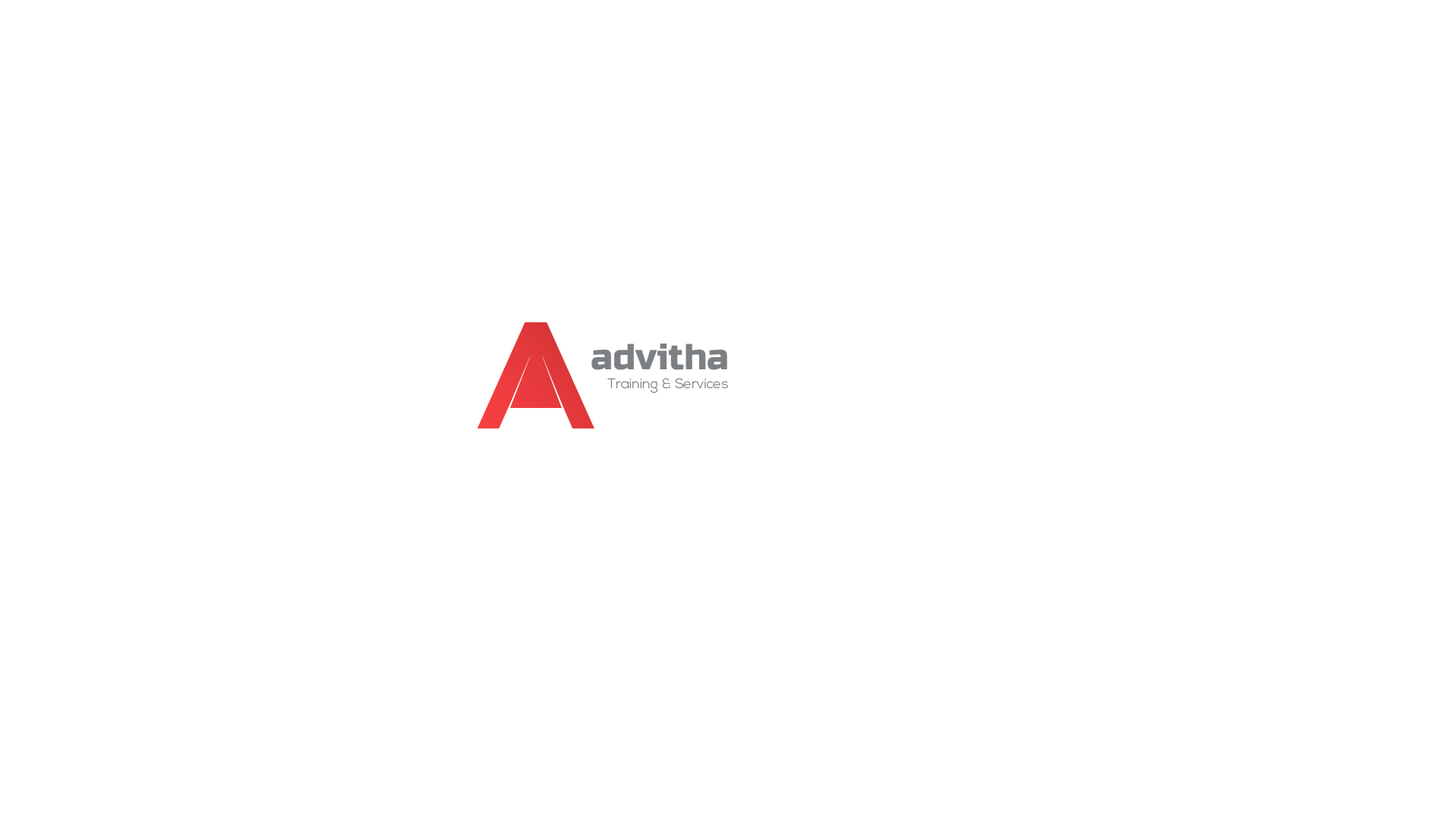
<style>
.page{position:relative;width:1456px;height:819px;background:#ffffff}
.page>*{position:absolute;margin:0}
.t1{font:36.4px "RussoOne-Regular";color:#7d8083}
.t2{font:13.6px "NexaLight";color:#7d8083}
</style>
<div class="page">
<p class="t1" style="left:591px;top:344px;width:136px;height:26px">advitha</p>
<p class="t2" style="left:607px;top:378px;width:121px;height:15px">Training &amp; Services</p>
</div>
